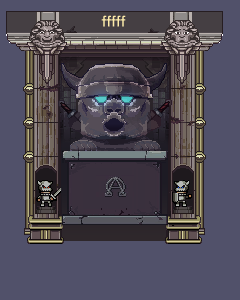
<style>
.page{position:relative;width:240px;height:300px;background:#51516a}
.page>*{position:absolute;margin:0}
.t1{font:14px "KoPubDotumBold";color:#ffedab}
</style>
<div class="page">
<p class="t1" style="left:101px;top:15px;width:25px;height:12px">fffff</p>
</div>
